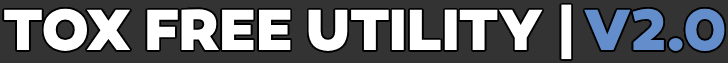
<style>
.page{position:relative;width:728px;height:63px;background:#333333}
.page>*{position:absolute;margin:0}
.t1{font:59.3px "Canaro-ExtraBold";color:#ffffff}
.t2{font:59.3px "Canaro-ExtraBold";color:#638ecb}
</style>
<div class="page">
<p class="t1" style="left:4px;top:4px;width:721px;height:56px">TOX FREE UTILITY | <span class="t2">V2.0</span></p>
</div>
